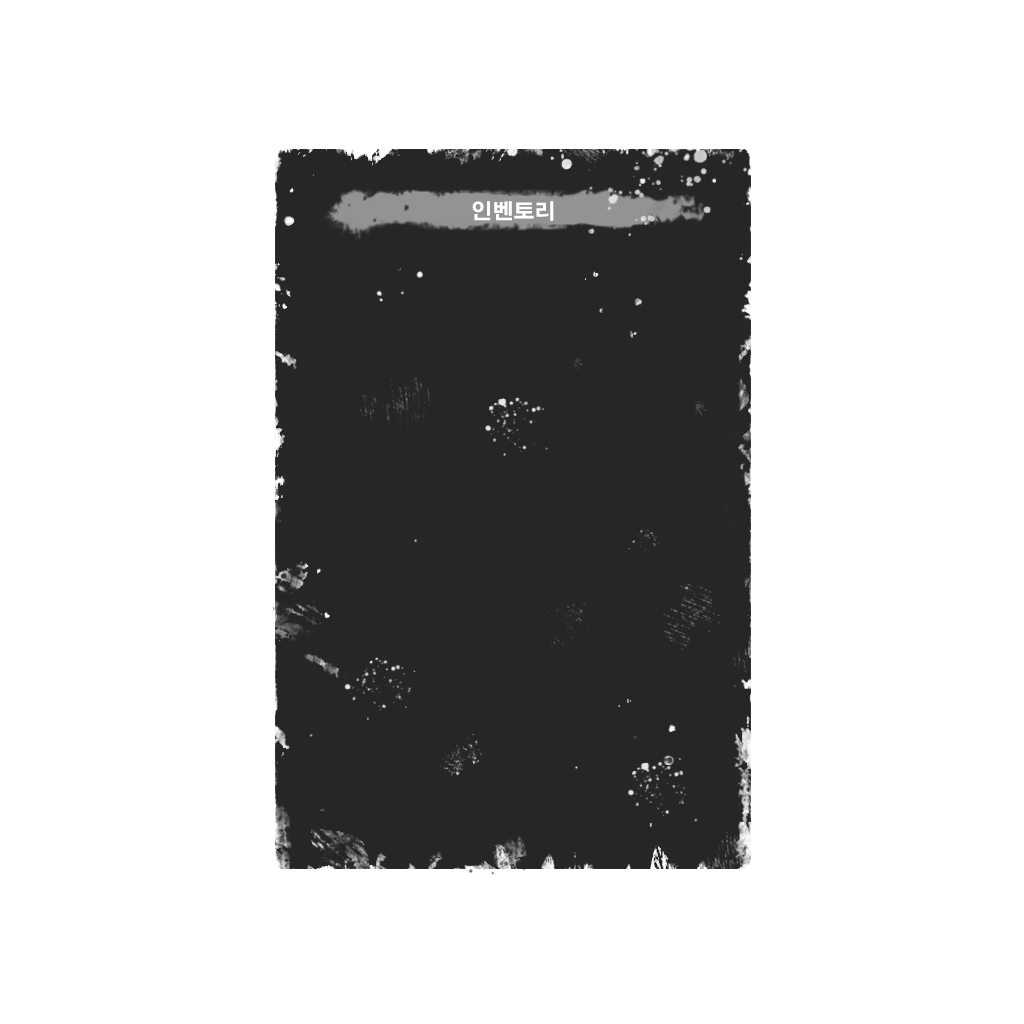
<style>
.page{position:relative;width:1024px;height:1024px;background:#ffffff}
.page>*{position:absolute;margin:0}
.t1{font:21.1px "HYgtrE";color:#ffffff}
</style>
<div class="page">
<p class="t1" style="left:472px;top:201px;width:82px;height:20px">인벤토리</p>
</div>
